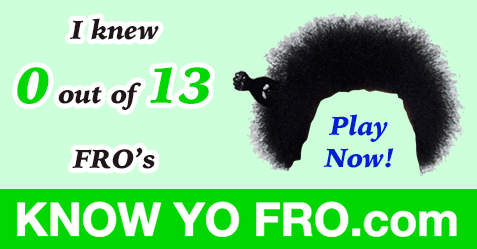
<style>
.page{position:relative;width:477px;height:249px;background:#ceffdb}
.page>*{position:absolute;margin:0}
.t1{font:27px "IowanOldStyle-BlackItalic";color:#201617}
.t2{font:53px "IowanOldStyle-BlackItalic";color:#00d600}
.t3{font:27px "IowanOldStyle-BlackItalic";color:#001ed2}
</style>
<div class="page">
<p class="t1" style="left:17px;top:18px;width:193px;height:151px;text-align:center">I knew<br><span class="t2">0</span> out of <span class="t2">13<br></span><br>FRO’s</p>
<p class="t3" style="left:323px;top:114px;width:71px;height:54px;text-align:center">Play<br>Now!</p>
</div>
